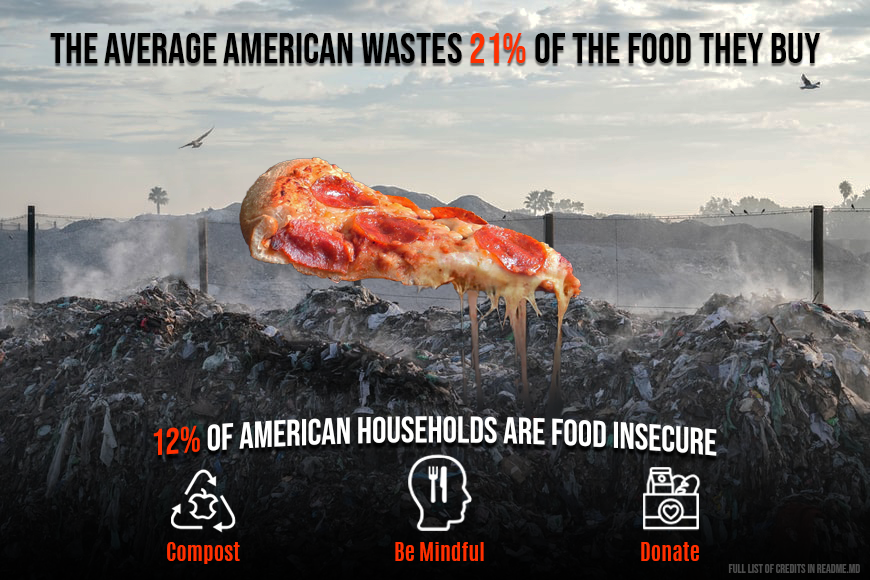
<style>
.page{position:relative;width:870px;height:580px}
.page>*{position:absolute;margin:0}
.t1{font:42px "BebasNeue-Regular";color:#000000}
.t2{font:42px "BebasNeue-Regular";color:#ff3000}
.t3{font:36px "BebasNeue-Regular";color:#ffffff}
.t4{font:36px "BebasNeue-Regular";color:#ff3000}
.t5{font:22px "Antonio-Bold";color:#ff3000}
.t6{font:12px "BebasNeue-Regular";color:#4c4c4c}
</style>
<div class="page">
<p class="t1" style="left:50px;top:33px;width:771px;height:30px">the average american wastes <span class="t2">21% </span>of the food they buy</p>
<p class="t3" style="left:153px;top:416px;width:564px;height:40px"><span class="t4">12%</span> of American households are food insecure</p>
<p class="t5" style="left:167px;top:542px;width:73px;height:22px">Compost</p>
<p class="t5" style="left:395px;top:542px;width:89px;height:19px">Be Mindful</p>
<p class="t5" style="left:641px;top:542px;width:58px;height:19px">Donate</p>
<p class="t6" style="left:728px;top:564px;width:132px;height:9px">Full list of credits in README.md</p>
</div>
